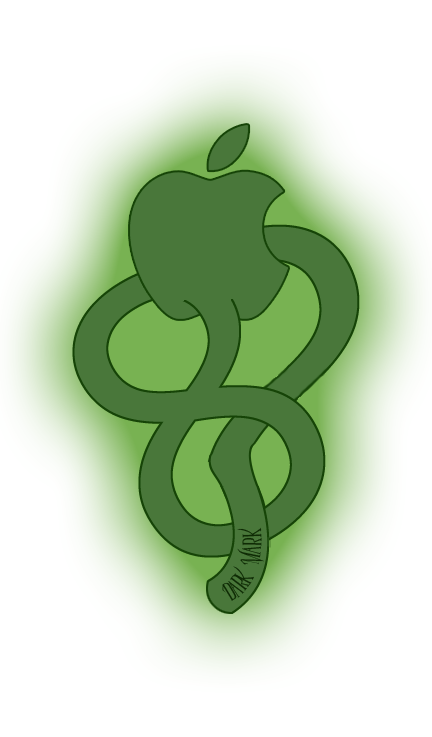
<style>
.page{position:relative;width:432px;height:737px;background:#ffffff}
.page>*{position:absolute;margin:0}
.t1{font:25px "Parseltongue";color:#0e2b04}
</style>
<div class="page">
<p class="t1" style="left:222px;top:527px;width:42px;height:74px;rotate:6deg">Dark Mark</p>
</div>
